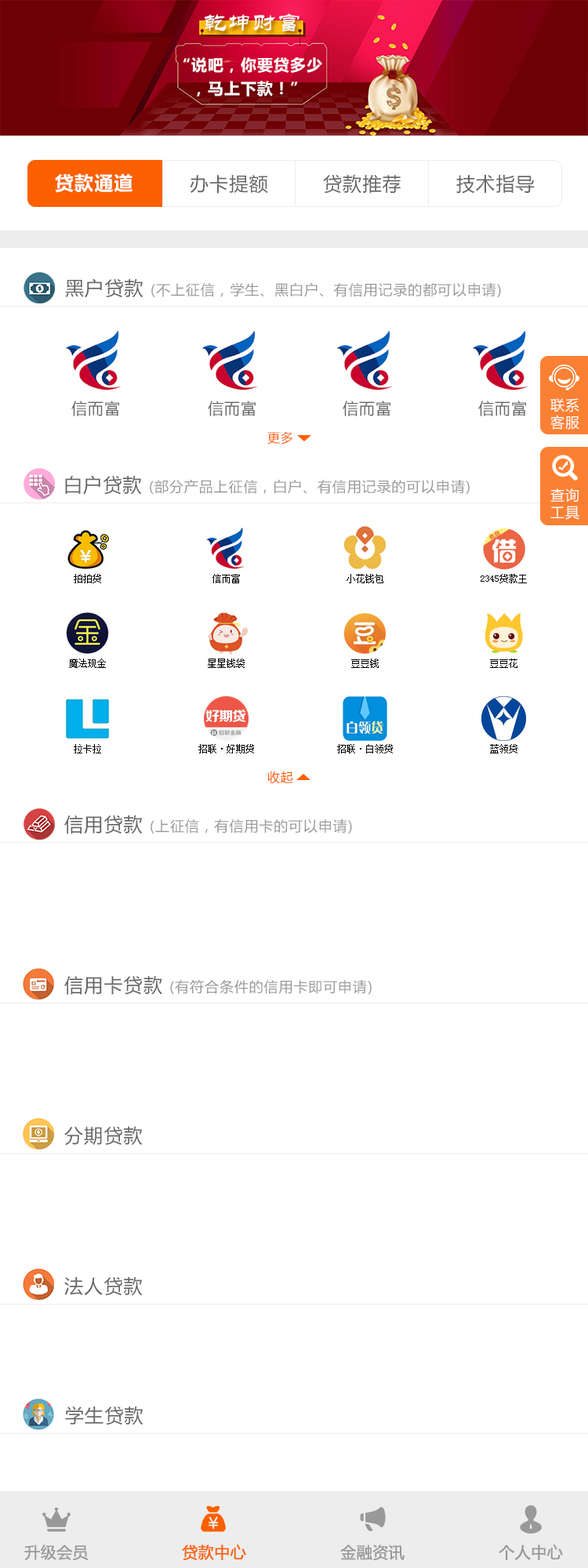
<style>
.page{position:relative;width:588px;height:1568px;background:#ffffff}
.page>*{position:absolute;margin:0}
.t1{font:23.5px "STLiti";letter-spacing:0.05em;color:#ffffff}
.t2{font:15.7px/23.5px "MicrosoftYaHei-Bold";letter-spacing:0.05em;color:#ffffff}
.t3{font:18.8px "MicrosoftYaHei-Bold";letter-spacing:0.05em;color:#ffffff}
.t4{font:18.8px "MicrosoftYaHei";letter-spacing:0.05em;color:#666666}
.t5{font:14.1px "MicrosoftYaHei";letter-spacing:0.05em;color:#999999}
.t6{font:15.7px "MicrosoftYaHei";letter-spacing:0.05em;color:#666666}
.t7{font:14.1px "MicrosoftYaHei";letter-spacing:0.05em;color:#ffffff}
.t8{font:12.5px "MicrosoftYaHei";letter-spacing:0.05em;color:#fb6000}
.t9{font:15.7px "MicrosoftYaHei";color:#999999;font-weight:bold}
.t10{font:15.7px "MicrosoftYaHei";color:#fb6000;font-weight:bold}
</style>
<div class="page">
<p class="t1" style="left:205px;top:13px;width:94px;height:18px">乾坤财富</p>
<p class="t2" style="left:183px;top:57px;width:139px;height:39px;text-align:center">“说吧，你要贷多少<br>，马上下款！”</p>
<p class="t3" style="left:55px;top:173px;width:77px;height:20px">贷款通道</p>
<p class="t4" style="left:190px;top:175px;width:78px;height:19px">办卡提额</p>
<p class="t4" style="left:323px;top:174px;width:78px;height:20px">贷款推荐</p>
<p class="t4" style="left:456px;top:175px;width:79px;height:19px">技术指导</p>
<p class="t5" style="left:65px;top:278px;width:436px;height:20px"><span class="t4">黑户贷款 </span>(不上征信，学生、黑白户、有信用记录的都可以申请)</p>
<p class="t6" style="left:71px;top:401px;width:48px;height:15px">信而富</p>
<p class="t6" style="left:208px;top:401px;width:48px;height:15px">信而富</p>
<p class="t6" style="left:343px;top:401px;width:47px;height:15px">信而富</p>
<p class="t6" style="left:478px;top:401px;width:48px;height:15px">信而富</p>
<p class="t7" style="left:550px;top:398px;width:29px;height:32px">联系<br>客服</p>
<p class="t8" style="left:267px;top:431px;width:25px;height:14px">更多</p>
<p class="t5" style="left:65px;top:475px;width:405px;height:20px"><span class="t4">白户贷款 </span>(部分产品上征信，白户、有信用记录的可以申请)</p>
<p class="t7" style="left:550px;top:488px;width:29px;height:32px">查询<br>工具</p>
<p class="t8" style="left:267px;top:771px;width:26px;height:13px">收起</p>
<p class="t5" style="left:64px;top:815px;width:288px;height:19px"><span class="t4">信用贷款 </span>(上征信，有信用卡的可以申请)</p>
<p class="t5" style="left:64px;top:975px;width:308px;height:20px"><span class="t4">信用卡贷款 </span>(有符合条件的信用卡即可申请)</p>
<p class="t4" style="left:64px;top:1126px;width:79px;height:19px">分期贷款</p>
<p class="t4" style="left:64px;top:1276px;width:79px;height:20px">法人贷款</p>
<p class="t4" style="left:65px;top:1406px;width:78px;height:19px">学生贷款</p>
<p class="t9" style="left:24px;top:1544px;width:65px;height:16px">升级会员</p>
<p class="t10" style="left:182px;top:1544px;width:64px;height:16px">贷款中心</p>
<p class="t9" style="left:340px;top:1544px;width:65px;height:16px">金融资讯</p>
<p class="t9" style="left:499px;top:1544px;width:64px;height:16px">个人中心</p>
</div>
